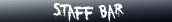
<style>
.page{position:relative;width:172px;height:22px}
.page>*{position:absolute;margin:0}
.t1{font:25px "YouMurdererBB";color:#ffffff}
</style>
<div class="page">
<p class="t1" style="left:53px;top:2px;width:71px;height:20px">Staff Bar</p>
</div>
